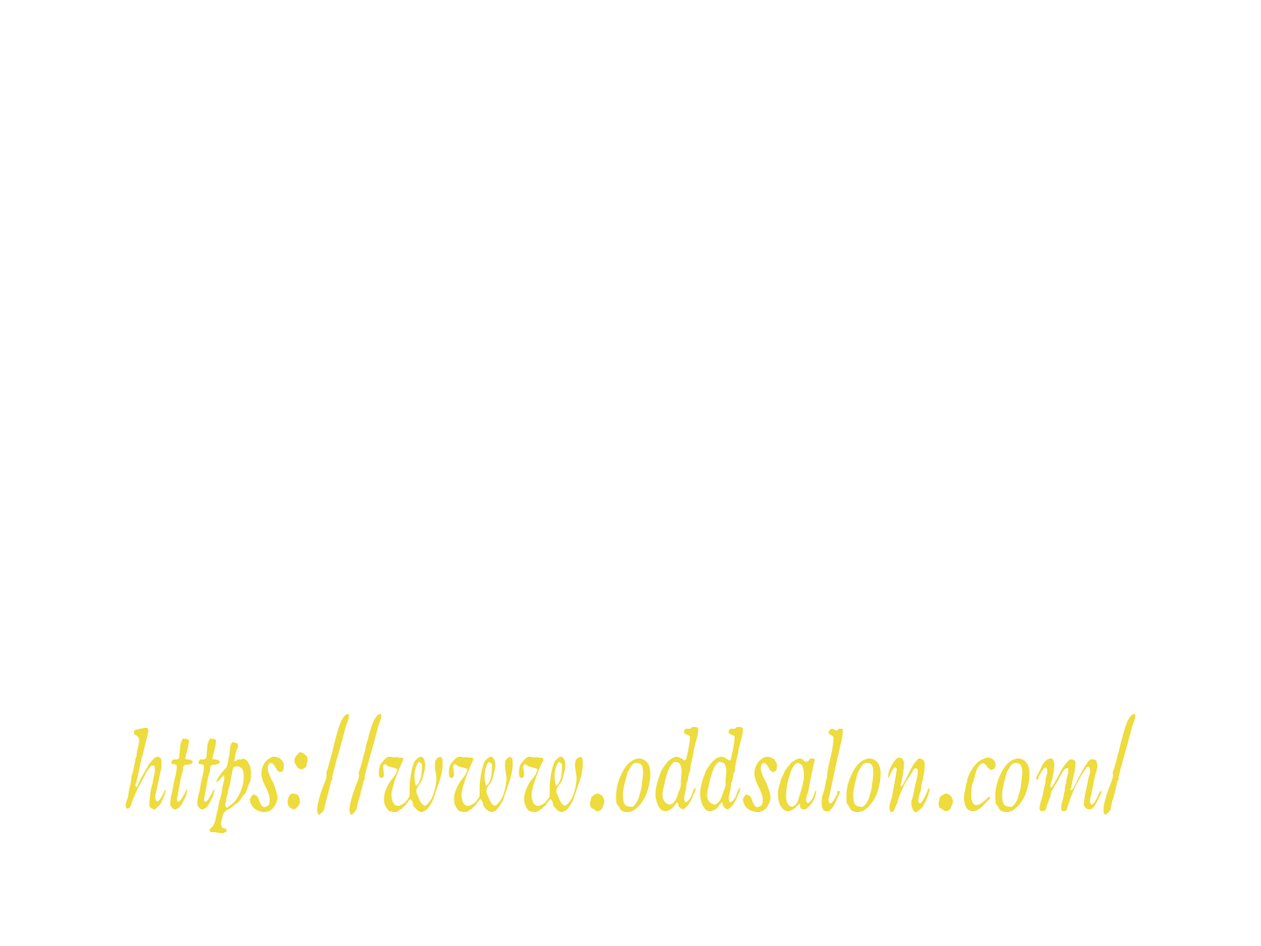
<style>
.page{position:relative;width:1261px;height:946px;background:#ffffff}
.page>*{position:absolute;margin:0}
.t1{font:112.5px "OldstyleItalicHPLHS";color:#eedb3d;scale:0.75 1}
</style>
<div class="page">
<p class="t1" style="left:125px;top:714px;width:1011px;height:119px">https://www.oddsalon.com/</p>
</div>
